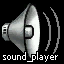
<style>
.page{position:relative;width:64px;height:64px;background:#000000}
.page>*{position:absolute;margin:0}
.t1{font:9px "Tahoma";color:#ffffff}
</style>
<div class="page">
<p class="t1" style="left:3px;top:52px;width:55px;height:10px">sound_player</p>
</div>
